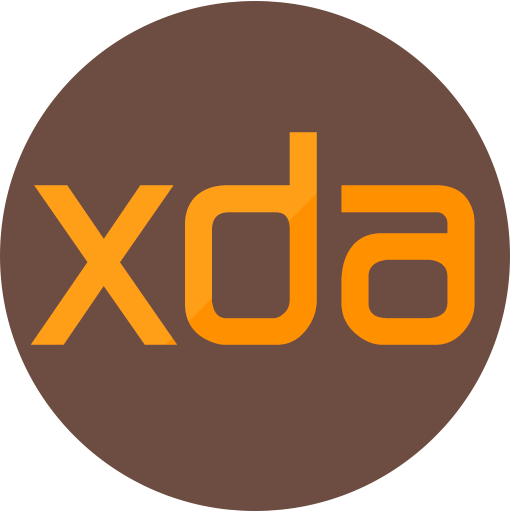
<style>
.page{position:relative;width:512px;height:512px;background:#6d4c41}
.page>*{position:absolute;margin:0}
.t1{font:303.2px "ContinuumMedium";letter-spacing:-0.04em;color:#ff9100}
</style>
<div class="page">
<p class="t1" style="left:31px;top:132px;width:444px;height:213px">xda</p>
</div>
